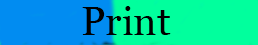
<style>
.page{position:relative;width:258px;height:45px;background:#01ff9d}
.page>*{position:absolute;margin:0}
.t1{font:40px "Georgia";color:#000000}
</style>
<div class="page">
<p class="t1" style="left:82px;top:6px;width:89px;height:29px">Print</p>
</div>
